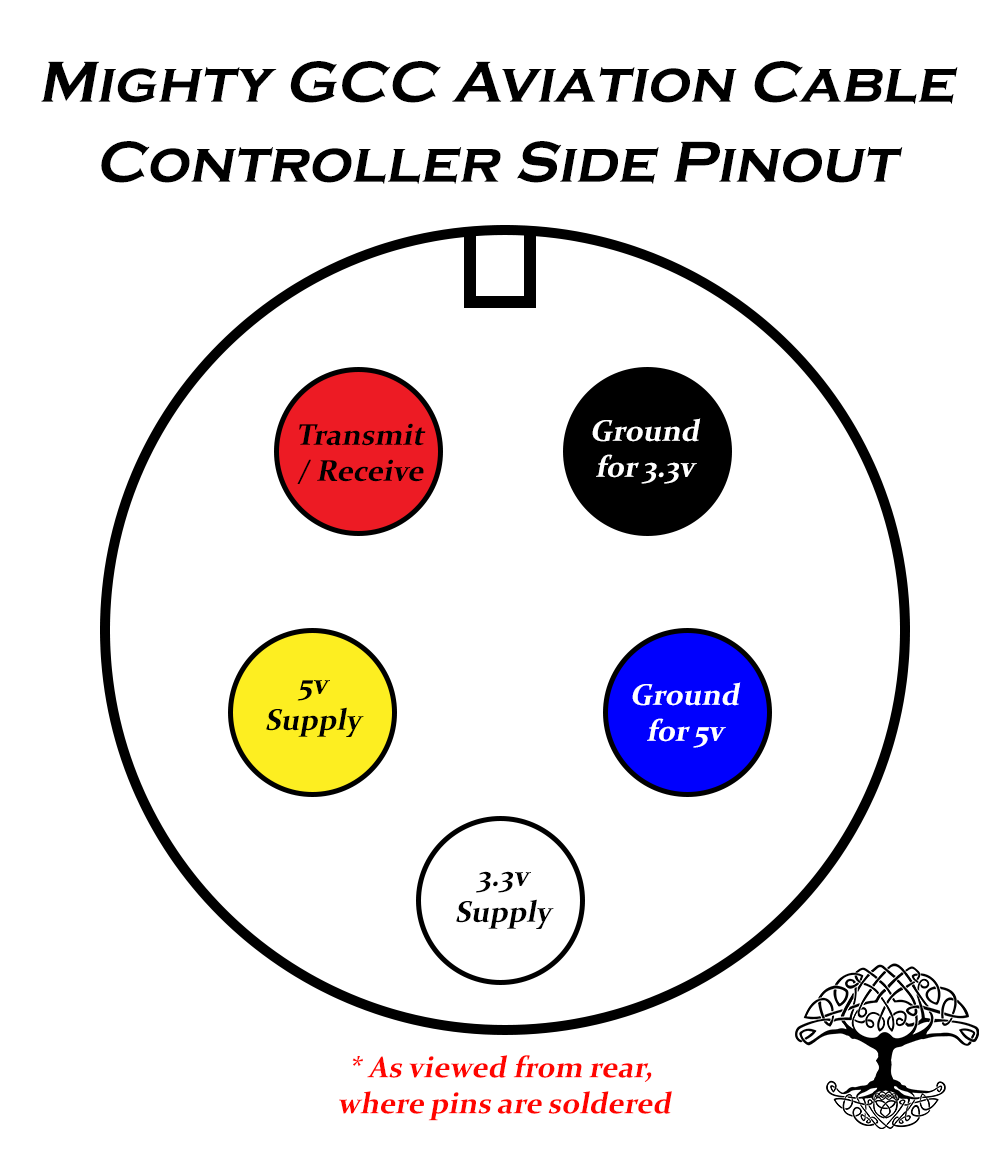
<style>
.page{position:relative;width:1000px;height:1158px;background:#ffffff}
.page>*{position:absolute;margin:0}
.t1{font:60px/80px "CopperplateGothic-Bold";color:#000000;font-style:italic}
.t2{font:30px "Constantia-Bold";color:#000000;font-style:italic}
.t3{font:30px "Constantia-Bold";color:#ffffff;font-style:italic}
.t4{font:30px "Constantia-Bold";color:#ff0500;font-style:italic}
</style>
<div class="page">
<p class="t1" style="left:41px;top:61px;width:917px;height:123px;text-align:center">Mighty GCC Aviation Cable<br>Controller Side Pinout</p>
<p class="t2" style="left:297px;top:423px;width:129px;height:61px;text-align:center">Transmit<br>/ Receive</p>
<p class="t3" style="left:592px;top:418px;width:109px;height:66px;text-align:center">Ground<br>for 3.3v</p>
<p class="t2" style="left:266px;top:680px;width:98px;height:57px;text-align:center">5v<br>Supply</p>
<p class="t3" style="left:632px;top:682px;width:109px;height:66px;text-align:center">Ground<br>for 5v</p>
<p class="t2" style="left:456px;top:871px;width:98px;height:58px;text-align:center">3.3v<br>Supply</p>
<p class="t4" style="left:339px;top:1055px;width:333px;height:66px;text-align:center">* As viewed from rear, <br>where pins are soldered</p>
</div>
